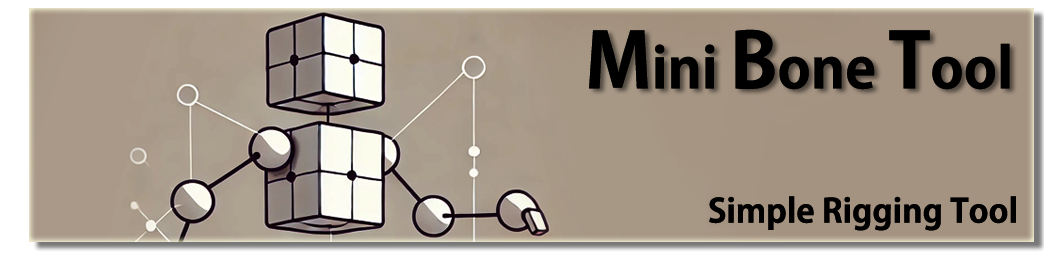
<style>
.page{position:relative;width:1044px;height:256px}
.page>*{position:absolute;margin:0}
.t1{font:55.6px "AdobeGothicStd-Bold";color:#000000}
.t2{font:75.5px "AdobeGothicStd-Bold";color:#000000}
.t3{font:32.6px "AdobeGothicStd-Bold";color:#000000}
</style>
<div class="page">
<p class="t1" style="left:589px;top:29px;width:421px;height:61px"><span class="t2">M</span>ini <span class="t2">B</span>one <span class="t2">T</span>ool</p>
<p class="t3" style="left:709px;top:196px;width:307px;height:35px">Simple Rigging Tool</p>
</div>
